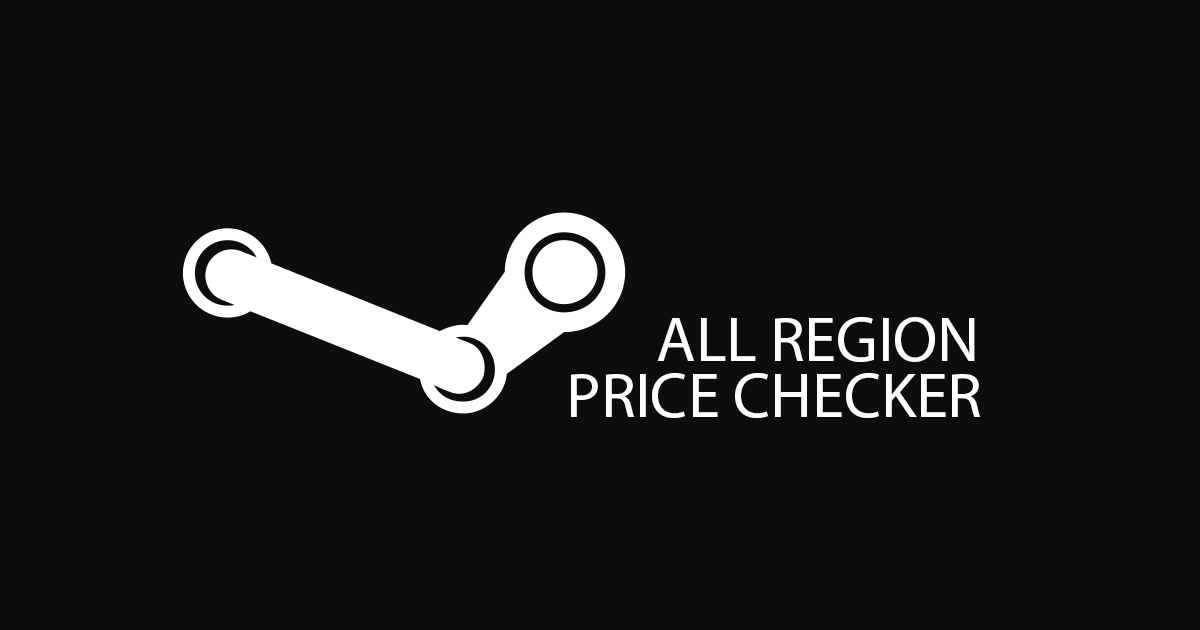
<style>
.page{position:relative;width:1200px;height:630px;background:#0d0d0d}
.page>*{position:absolute;margin:0}
.t1{font:64.3px "MyriadPro-Regular";color:#ffffff}
</style>
<div class="page">
<p class="t1" style="left:657px;top:317px;width:318px;height:45px">ALL REGION</p>
<p class="t1" style="left:571px;top:373px;width:410px;height:45px">PRICE CHECKER</p>
</div>
